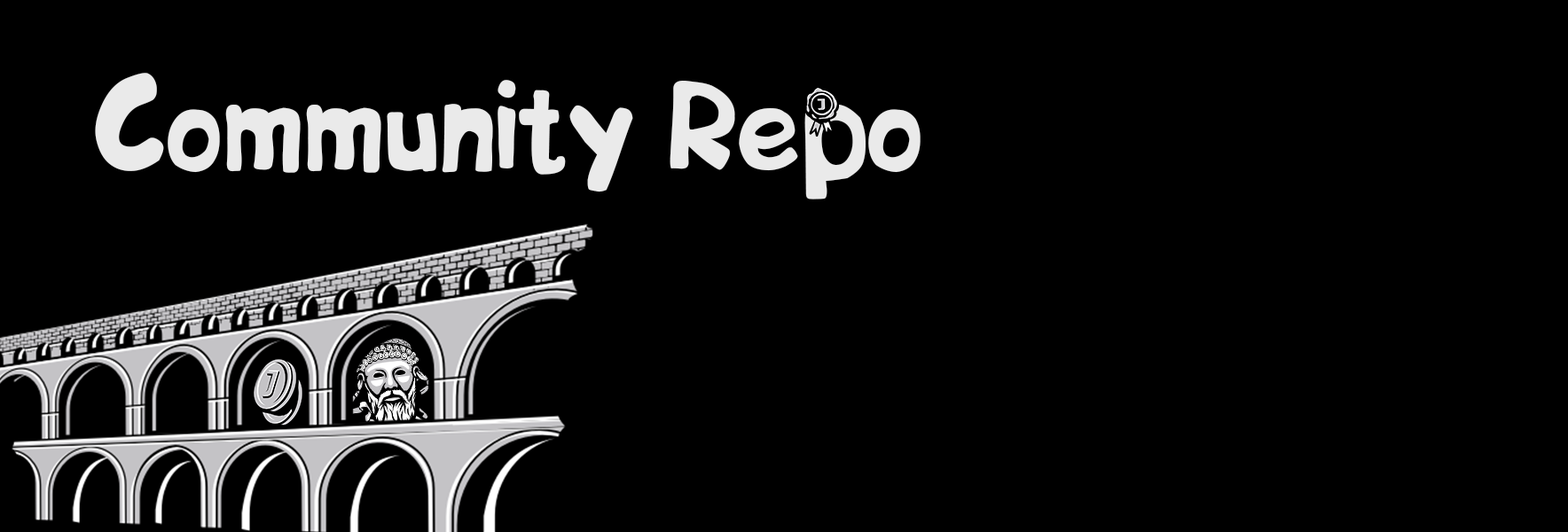
<style>
.page{position:relative;width:1568px;height:532px;background:#000000}
.page>*{position:absolute;margin:0}
.t1{font:111.4px "BIPs";color:#eaeaea}
</style>
<div class="page">
<p class="t1" style="left:95px;top:73px;width:826px;height:127px">Community Repo</p>
</div>
